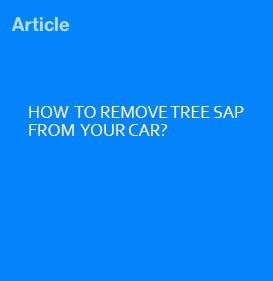
<style>
.page{position:relative;width:273px;height:281px;background:#0484fa}
.page>*{position:absolute;margin:0}
.t1{font:18px/18px "Corbel";letter-spacing:-0.01em;color:#f8f9fa}
</style>
<div class="page">
<p class="t1" style="left:29px;top:106px;width:215px;height:30px">HOW  TO REMOVE TREE SAP<br>FROM  YOUR CAR?</p>
</div>
